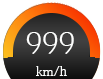
<style>
.page{position:relative;width:103px;height:79px}
.page>*{position:absolute;margin:0}
.t1{font:30px "WONBatang";color:#fefffe}
.t2{font:13px "WONBatang";color:#fefffe}
</style>
<div class="page">
<p class="t1" style="left:26px;top:32px;width:48px;height:22px">999</p>
<p class="t2" style="left:36px;top:66px;width:31px;height:10px">km/h</p>
</div>
